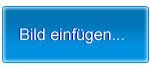
<style>
.page{position:relative;width:150px;height:70px;background:#ffffff}
.page>*{position:absolute;margin:0}
.t1{font:16px "ArialMT"}
.t2{font:16px "ArialMT";color:#ffffff}
</style>
<div class="page">
<p class="t1" style="left:19px;top:28px;width:91px;height:16px">Bild einfügen</p>
<p class="t2" style="left:20px;top:28px;width:104px;height:16px">Bild einfügen...</p>
</div>
